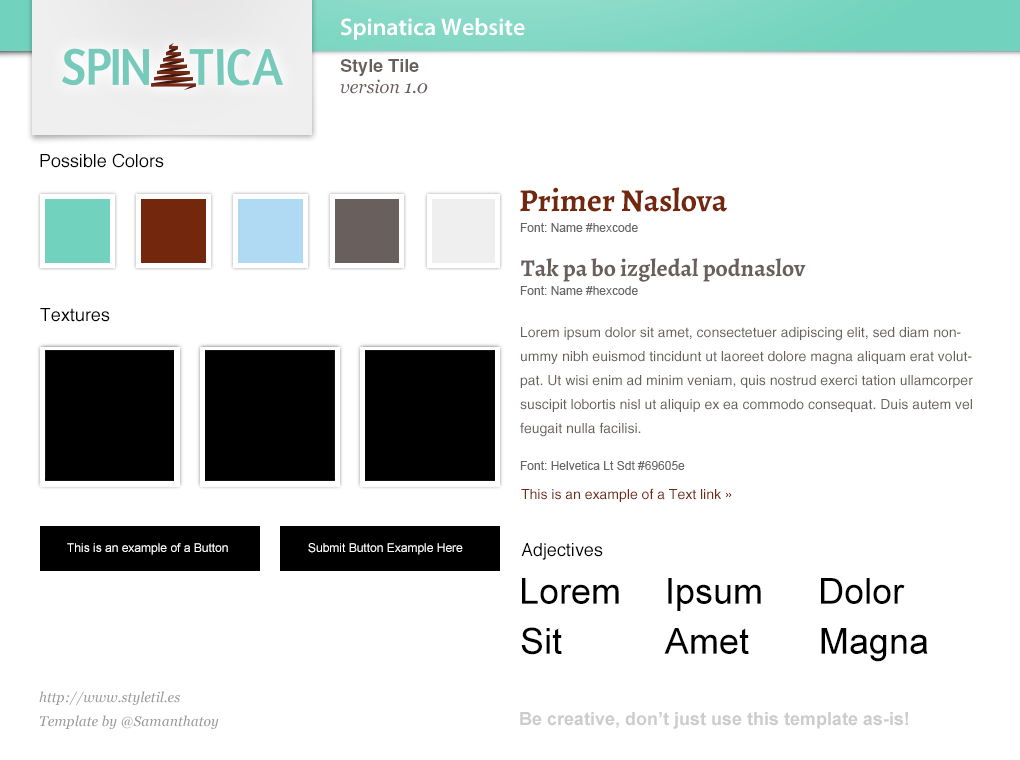
<style>
.page{position:relative;width:1020px;height:760px;background:#ffffff}
.page>*{position:absolute;margin:0}
.t1{font:24px "MyriadPro-Semibold";color:#ffffff}
.t2{font:18px "HelveticaLTStd-Bold";color:#69605e}
.t3{font:18px "Georgia-Italic";color:#69605e}
.t4{font:18px "Helvetica";color:#000000}
.t5{font:32px "Alegreya-Bold";color:#73270d}
.t6{font:12px "ArialMT";color:#666666}
.t7{font:24px "Alegreya-Bold";color:#69605e}
.t8{font:14px/24px "HelveticaLTStd-Roman";color:#69605e}
.t9{font:14px "HelveticaLTStd-Roman";color:#73270d}
.t10{font:12px "ArialMT";color:#ffffff}
.t11{font:36px "ArialMT";color:#000000}
.t12{font:14px/24px "Georgia-Italic";color:#999999}
.t13{font:18px "Arial-BoldMT";color:#cccccc}
</style>
<div class="page">
<p class="t1" style="left:341px;top:18px;width:184px;height:22px">Spinatica Website</p>
<p class="t2" style="left:340px;top:59px;width:79px;height:17px">Style Tile</p>
<p class="t3" style="left:340px;top:79px;width:88px;height:15px">version 1.0</p>
<p class="t4" style="left:40px;top:153px;width:124px;height:15px">Possible Colors</p>
<p class="t5" style="left:520px;top:187px;width:207px;height:25px">Primer Naslova</p>
<p class="t6" style="left:520px;top:223px;width:118px;height:9px">Font: Name #hexcode</p>
<p class="t7" style="left:521px;top:258px;width:285px;height:24px">Tak pa bo izgledal podnaslov</p>
<p class="t6" style="left:520px;top:286px;width:118px;height:9px">Font: Name #hexcode</p>
<p class="t4" style="left:40px;top:308px;width:70px;height:14px">Textures</p>
<p class="t8" style="left:520px;top:327px;width:453px;height:110px">Lorem ipsum dolor sit amet, consectetuer adipiscing elit, sed diam nonummy nibh euismod tincidunt ut laoreet dolore magna aliquam erat volutpat. Ut wisi enim ad minim veniam, quis nostrud exerci tation ullamcorper suscipit lobortis nisl ut aliquip ex ea commodo consequat. Duis autem vel feugait nulla facilisi.</p>
<p class="t6" style="left:520px;top:461px;width:165px;height:9px">Font: Helvetica Lt Sdt #69605e</p>
<p class="t9" style="left:521px;top:488px;width:211px;height:14px">This is an example of a Text link »</p>
<p class="t10" style="left:67px;top:543px;width:161px;height:12px">This is an example of a Button</p>
<p class="t10" style="left:308px;top:543px;width:155px;height:12px">Submit Button Example Here</p>
<p class="t4" style="left:521px;top:543px;width:82px;height:17px">Adjectives</p>
<p class="t11" style="left:522px;top:578px;width:97px;height:26px">Lorem</p>
<p class="t11" style="left:668px;top:578px;width:93px;height:33px">Ipsum</p>
<p class="t11" style="left:821px;top:578px;width:84px;height:26px">Dolor</p>
<p class="t11" style="left:521px;top:627px;width:41px;height:28px">Sit</p>
<p class="t11" style="left:664px;top:628px;width:85px;height:26px">Amet</p>
<p class="t11" style="left:821px;top:628px;width:107px;height:34px">Magna</p>
<p class="t12" style="left:39px;top:691px;width:180px;height:38px">http://www.styletil.es<br>Template by @Samanthatoy</p>
<p class="t13" style="left:520px;top:712px;width:388px;height:17px">Be creative, don’t just use this template as-is!</p>
</div>
